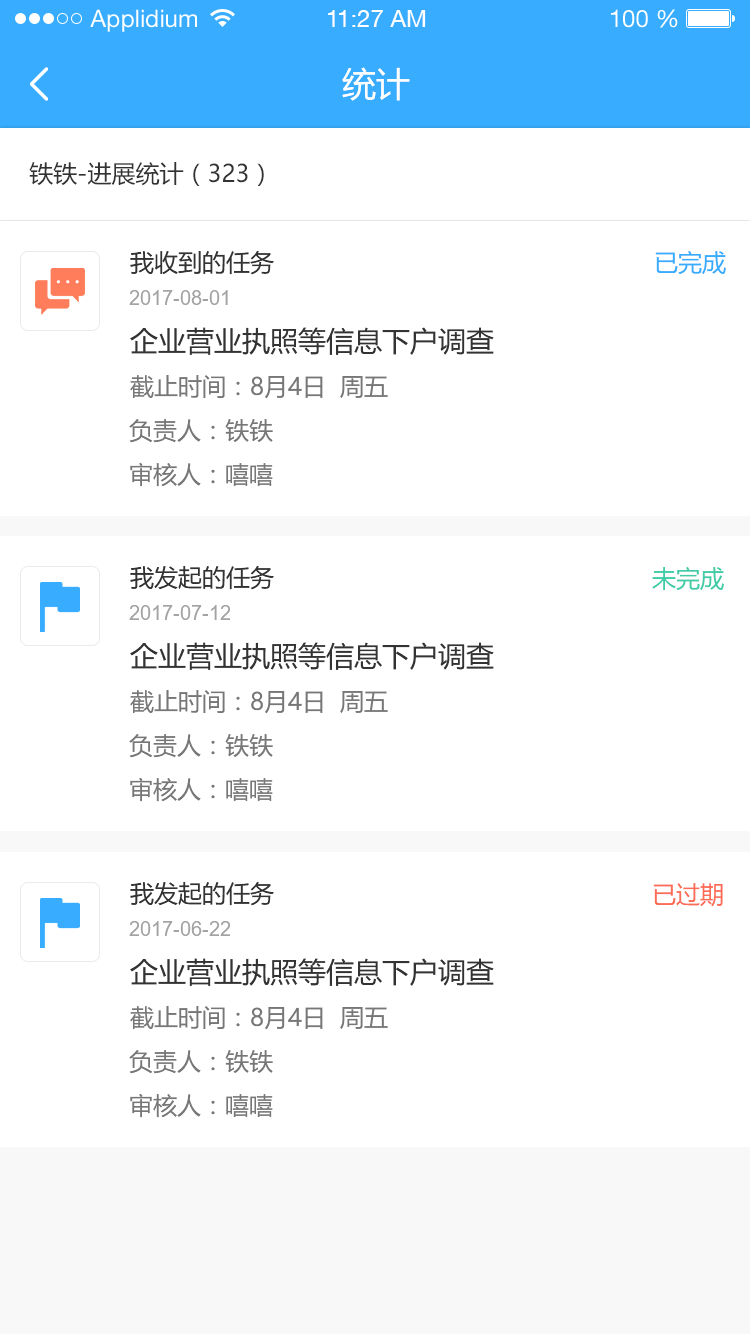
<style>
.page{position:relative;width:750px;height:1334px;background:#ffffff}
.page>*{position:absolute;margin:0}
.t1{font:24px "HelveticaNeueLTStd-Roman";color:#ffffff}
.t2{font:24px "HelveticaNeueCE-Roman";color:#ffffff}
.t3{font:34px "MicrosoftYaHei";color:#ffffff}
.t4{font:24px "MicrosoftYaHei";color:#333333}
.t5{font:24px "MicrosoftYaHei";color:#38adff}
.t6{font:20px "ArialMT";color:#a3a3a3}
.t7{font:28px "MicrosoftYaHei";color:#333333}
.t8{font:24px "MicrosoftYaHei";color:#777777}
.t9{font:24px "MicrosoftYaHei";color:#3fcca7}
.t10{font:24px "MicrosoftYaHei";color:#fd6c57}
</style>
<div class="page">
<p class="t1" style="left:90px;top:9px;width:107px;height:23px">Applidium</p>
<p class="t2" style="left:328px;top:10px;width:98px;height:17px">11:27 AM</p>
<p class="t1" style="left:611px;top:9px;width:67px;height:19px">100 %</p>
<p class="t3" style="left:342px;top:67px;width:68px;height:34px">统计</p>
<p class="t4" style="left:29px;top:162px;width:235px;height:24px">铁铁-进展统计（323）</p>
<p class="t4" style="left:130px;top:250px;width:144px;height:25px">我收到的任务</p>
<p class="t5" style="left:655px;top:251px;width:71px;height:23px">已完成</p>
<p class="t6" style="left:129px;top:290px;width:99px;height:15px">2017-08-01</p>
<p class="t7" style="left:130px;top:327px;width:364px;height:28px">企业营业执照等信息下户调查</p>
<p class="t8" style="left:130px;top:375px;width:258px;height:24px">截止时间：8月4日  周五</p>
<p class="t8" style="left:129px;top:419px;width:144px;height:24px">负责人：铁铁</p>
<p class="t8" style="left:130px;top:462px;width:143px;height:25px">审核人：嘻嘻</p>
<p class="t4" style="left:130px;top:565px;width:144px;height:25px">我发起的任务</p>
<p class="t9" style="left:652px;top:567px;width:72px;height:23px">未完成</p>
<p class="t6" style="left:129px;top:605px;width:101px;height:15px">2017-07-12</p>
<p class="t7" style="left:130px;top:642px;width:364px;height:28px">企业营业执照等信息下户调查</p>
<p class="t8" style="left:130px;top:690px;width:258px;height:24px">截止时间：8月4日  周五</p>
<p class="t8" style="left:129px;top:734px;width:144px;height:24px">负责人：铁铁</p>
<p class="t8" style="left:130px;top:777px;width:143px;height:25px">审核人：嘻嘻</p>
<p class="t4" style="left:130px;top:881px;width:144px;height:25px">我发起的任务</p>
<p class="t10" style="left:653px;top:883px;width:70px;height:24px">已过期</p>
<p class="t6" style="left:129px;top:921px;width:101px;height:15px">2017-06-22</p>
<p class="t7" style="left:130px;top:958px;width:364px;height:28px">企业营业执照等信息下户调查</p>
<p class="t8" style="left:130px;top:1006px;width:258px;height:24px">截止时间：8月4日  周五</p>
<p class="t8" style="left:129px;top:1050px;width:144px;height:24px">负责人：铁铁</p>
<p class="t8" style="left:130px;top:1093px;width:143px;height:25px">审核人：嘻嘻</p>
</div>
